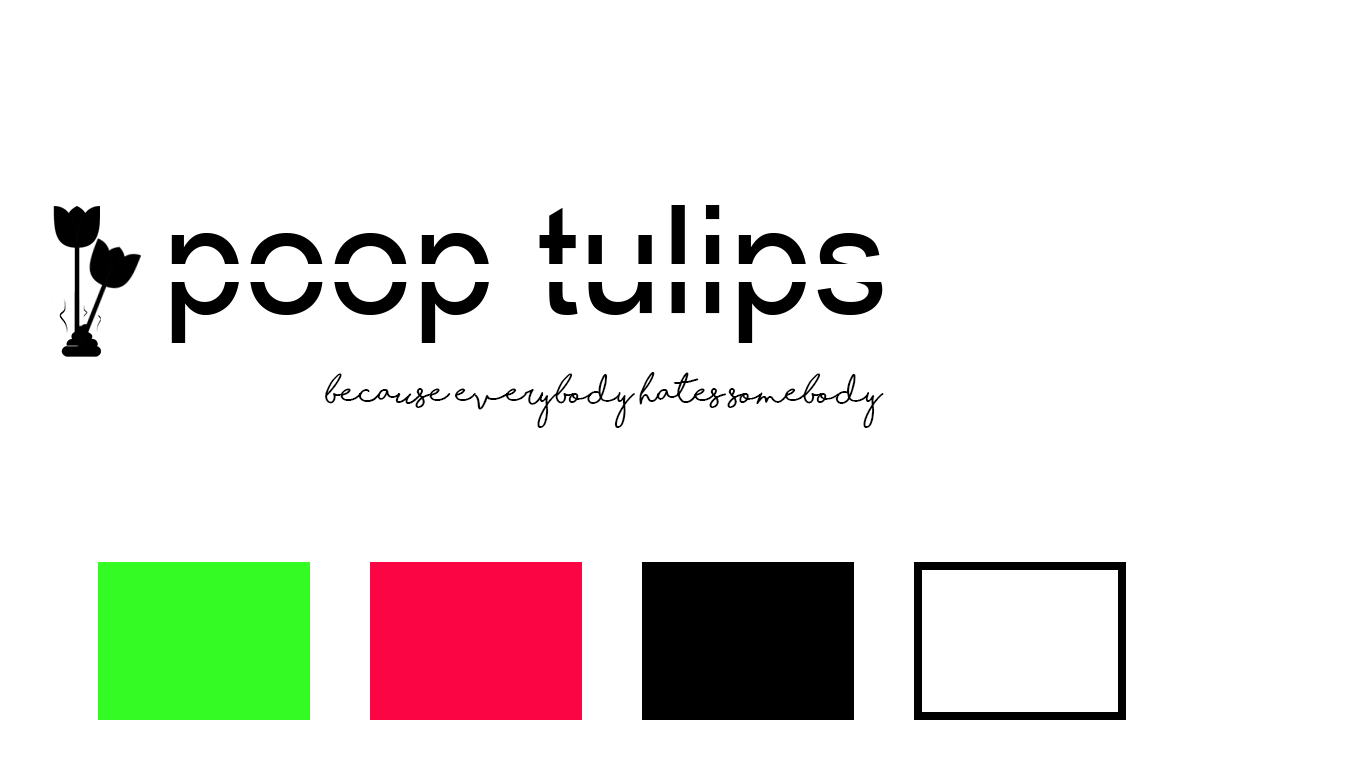
<style>
.page{position:relative;width:1366px;height:768px;background:#ffffff}
.page>*{position:absolute;margin:0}
.t1{font:30px "ShorelinesScriptBold";color:#000000}
</style>
<div class="page">
<p class="t1" style="left:325px;top:372px;width:559px;height:56px">because everybody hates somebody</p>
</div>
